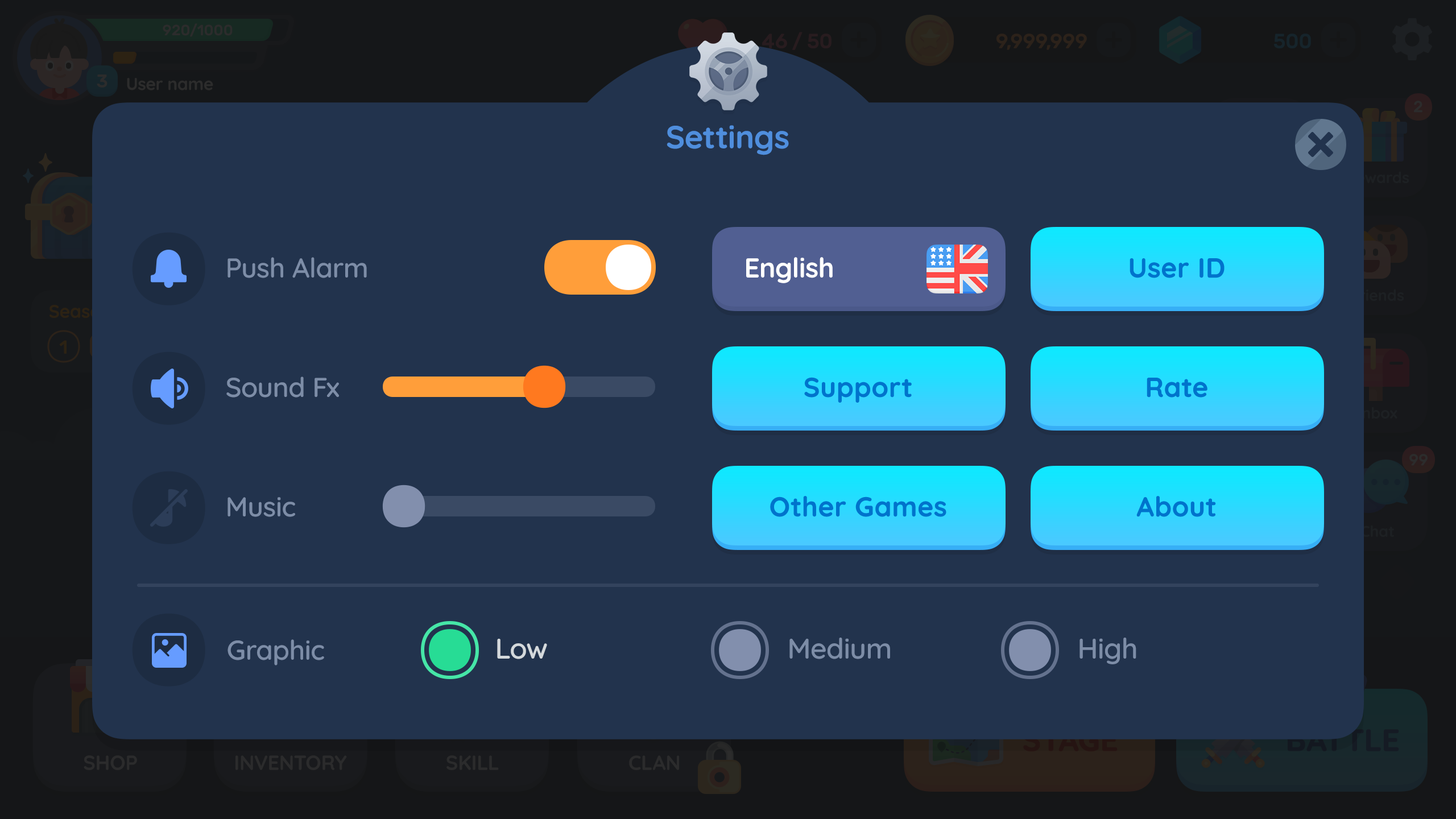
<style>
.page{position:relative;width:1456px;height:819px;background:#22334d}
.page>*{position:absolute;margin:0}
.t1{font:31.8px "Quicksand-Bold";color:#4f8edd}
.t2{font:27.3px "Quicksand-SemiBold";letter-spacing:-0.01em;color:#7d8da7}
.t3{font:27.3px "Quicksand-Bold";letter-spacing:-0.01em;color:#ffffff}
.t4{font:27.3px "Quicksand-Bold";letter-spacing:-0.01em;color:#0073cc;font-weight:bold}
.t5{font:28.4px "Quicksand-SemiBold";letter-spacing:-0.01em;color:#d4d9dc}
.t6{font:28.4px "Quicksand-SemiBold";letter-spacing:-0.01em;color:#7d8da7}
</style>
<div class="page">
<p class="t1" style="left:667px;top:125px;width:122px;height:30px">Settings</p>
<p class="t2" style="left:227px;top:257px;width:140px;height:21px">Push Alarm</p>
<p class="t3" style="left:746px;top:257px;width:87px;height:26px">English</p>
<p class="t4" style="left:1130px;top:258px;width:95px;height:20px">User ID</p>
<p class="t2" style="left:226px;top:377px;width:113px;height:21px">Sound Fx</p>
<p class="t4" style="left:804px;top:377px;width:108px;height:26px">Support</p>
<p class="t4" style="left:1147px;top:378px;width:60px;height:20px">Rate</p>
<p class="t2" style="left:227px;top:497px;width:68px;height:20px">Music</p>
<p class="t4" style="left:770px;top:496px;width:176px;height:21px">Other Games</p>
<p class="t4" style="left:1136px;top:496px;width:80px;height:21px">About</p>
<p class="t2" style="left:227px;top:639px;width:97px;height:26px">Graphic</p>
<p class="t5" style="left:497px;top:639px;width:50px;height:20px">Low</p>
<p class="t6" style="left:789px;top:638px;width:101px;height:21px">Medium</p>
<p class="t6" style="left:1079px;top:638px;width:57px;height:26px">High</p>
</div>
